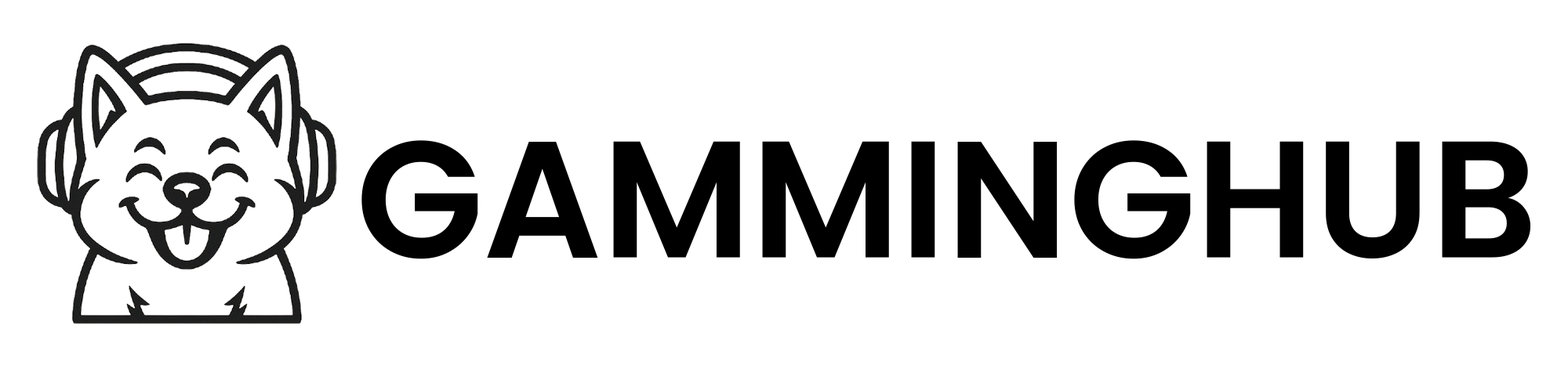
<style>
.page{position:relative;width:1568px;height:383px;background:#ffffff}
.page>*{position:absolute;margin:0}
.t1{font:165.9px "Poppins-SemiBold";color:#000000;text-transform:uppercase}
</style>
<div class="page">
<p class="t1" style="left:361px;top:140px;width:1169px;height:120px">gamminghub</p>
</div>
